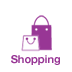
<style>
.page{position:relative;width:72px;height:72px;background:#ffffff}
.page>*{position:absolute;margin:0}
.t1{font:11px "HelveticaNeue-Bold";color:#983695}
</style>
<div class="page">
<p class="t1" style="left:11px;top:55px;width:49px;height:10px">Shopping</p>
</div>
